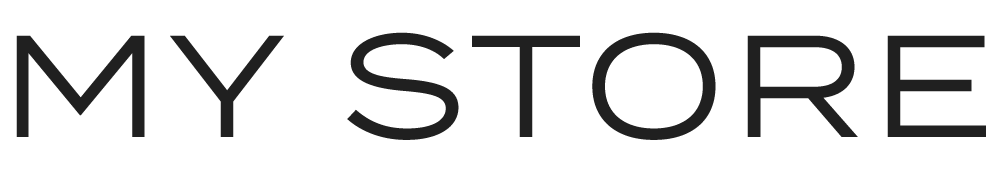
<style>
.page{position:relative;width:1000px;height:180px;background:#ffffff}
.page>*{position:absolute;margin:0}
.t1{font:144.4px "Termina-Regular";letter-spacing:0.045em;color:#202020;font-variant:small-caps}
</style>
<div class="page">
<p class="t1" style="left:16px;top:32px;width:970px;height:108px">MY STORE</p>
</div>
